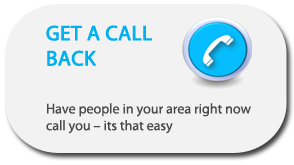
<style>
.page{position:relative;width:294px;height:165px;background:#f2f2f2}
.page>*{position:absolute;margin:0}
.t1{font:14px "MyriadPro-Regular";color:#4a4849}
.t2{font:21px "MyriadPro-Regular";color:#00b0f0;font-weight:bold}
</style>
<div class="page">
<p class="t1" style="left:46px;top:25px;width:205px;height:109px"><span class="t2">GET A CALL <br>BACK<br><br><br></span>Have people in your area right now call you – its that easy</p>
</div>
